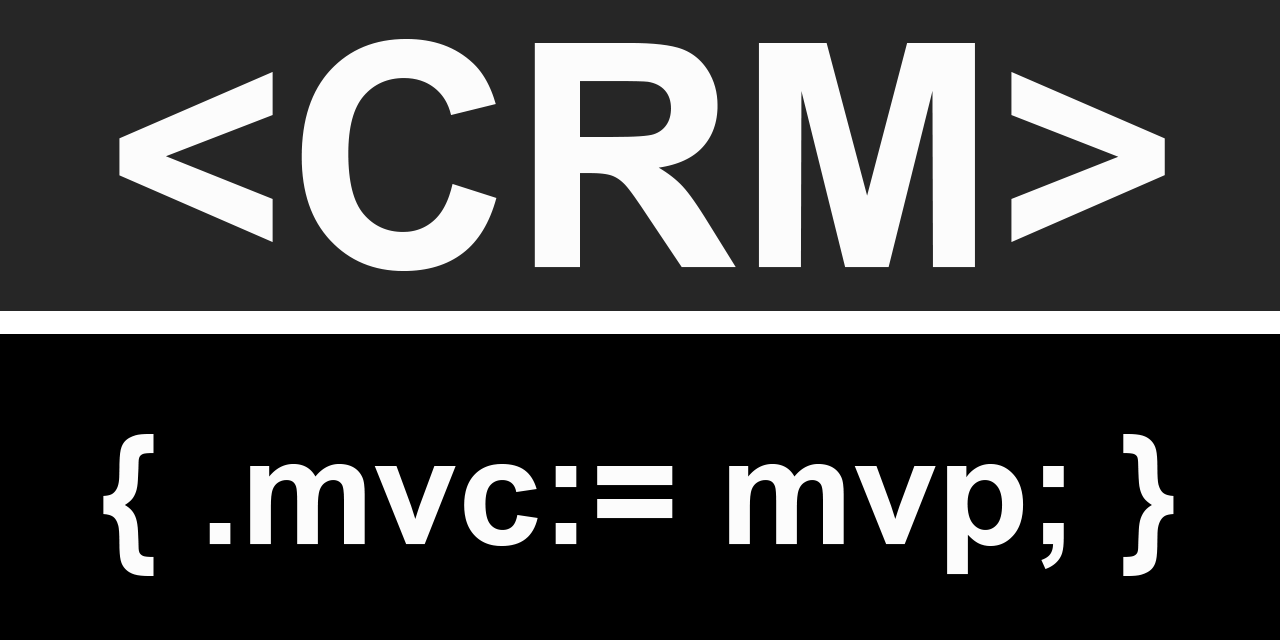
<style>
.page{position:relative;width:1280px;height:640px;background:#000000}
.page>*{position:absolute;margin:0}
.t1{font:311.8px "Arial-BoldMT";color:#fcfcfc}
.t2{font:150px "Arial-BoldMT";color:#fcfcfc}
</style>
<div class="page">
<p class="t1" style="left:119px;top:39px;width:1046px;height:232px">&lt;CRM&gt;</p>
<p class="t2" style="left:103px;top:434px;width:1071px;height:142px">{ .mvc:= mvp; }</p>
</div>
